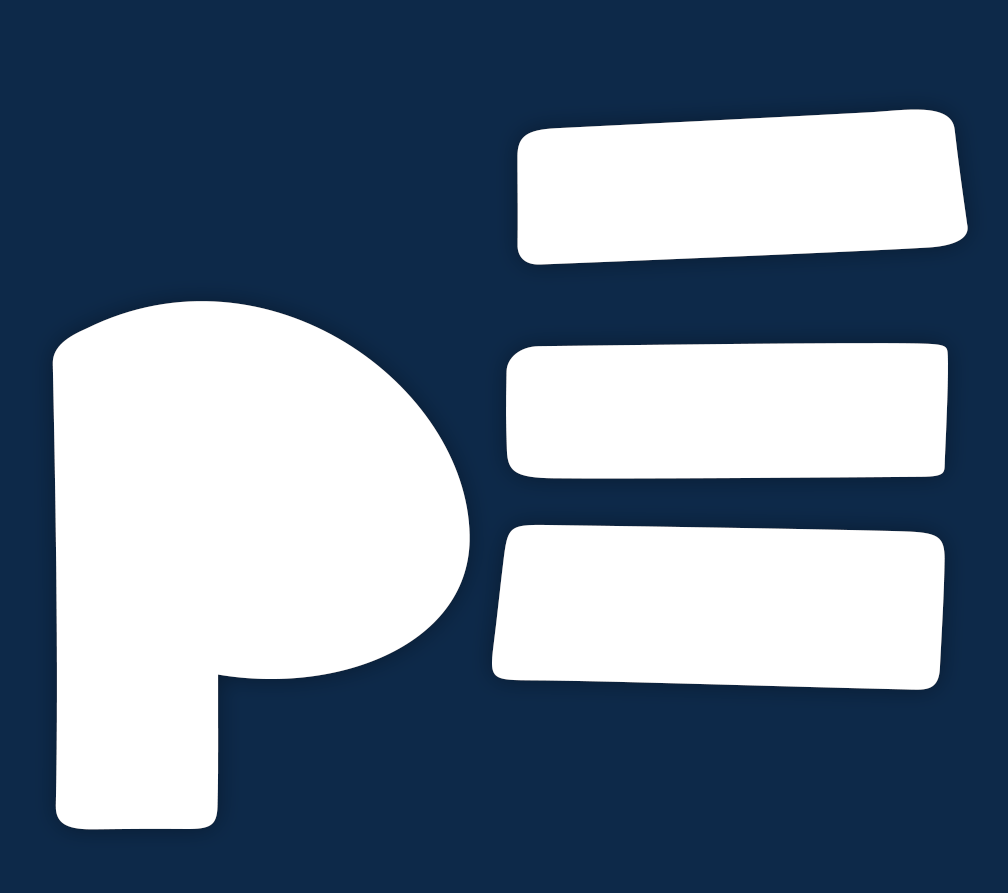
<style>
.page{position:relative;width:1008px;height:893px;background:#0d2949}
.page>*{position:absolute;margin:0}
.t1{font:849.1px "BrownieWalnutRegular";color:#ffffff;scale:1.27 1}
</style>
<div class="page">
<p class="t1" style="left:52px;top:109px;width:916px;height:721px">pE</p>
</div>
